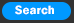
<style>
.page{position:relative;width:74px;height:23px;background:#0099ff}
.page>*{position:absolute;margin:0}
.t1{font:12.4px "FranklinGothic-Demi";color:#ffffff;scale:1.05 1}
</style>
<div class="page">
<p class="t1" style="left:15px;top:5px;width:39px;height:10px">Search</p>
</div>
